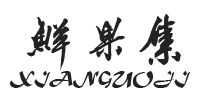
<style>
.page{position:relative;width:200px;height:100px;background:#ffffff}
.page>*{position:absolute;margin:0}
.t1{font:64px "SCFXJH";color:#222222}
.t2{font:18px "MaturaMTScriptCapitals";color:#222222}
</style>
<div class="page">
<p class="t1" style="left:27px;top:17px;width:44px;height:53px">鲜</p>
<p class="t1" style="left:89px;top:17px;width:36px;height:44px">果</p>
<p class="t1" style="left:139px;top:14px;width:42px;height:51px">集</p>
<p class="t2" style="left:9px;top:71px;width:181px;height:17px">XIANGUOJI</p>
</div>
